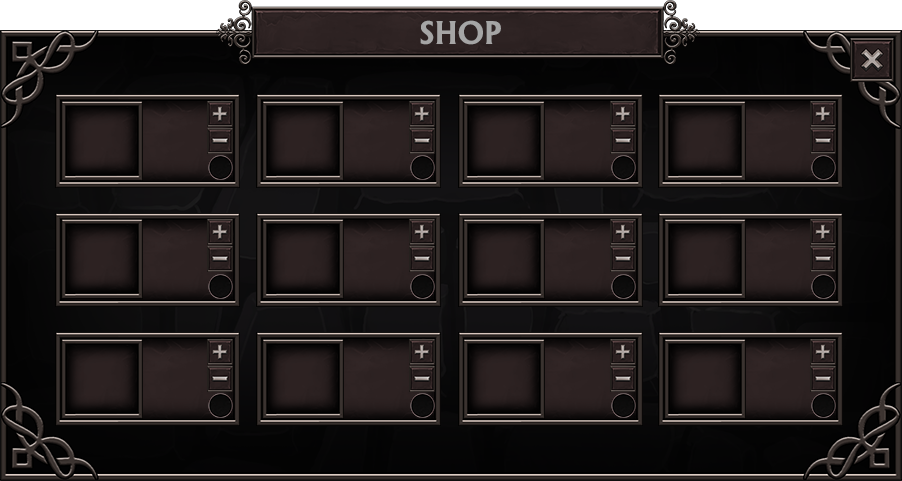
<style>
.page{position:relative;width:902px;height:481px}
.page>*{position:absolute;margin:0}
.t1{font:30px "AlbertusBold-Regular";color:#a5a5a5}
</style>
<div class="page">
<p class="t1" style="left:420px;top:20px;width:81px;height:25px">SHOP</p>
</div>
